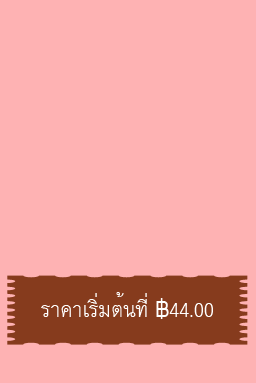
<style>
.page{position:relative;width:256px;height:383px;background:#feb2b3}
.page>*{position:absolute;margin:0}
.t1{font:30px "DSNAnuRak";color:#ffffff}
</style>
<div class="page">
<p class="t1" style="left:41px;top:292px;width:172px;height:27px">ราคาเริ่มต้นที่ ฿44.00</p>
</div>
